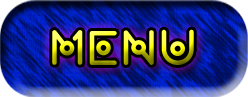
<style>
.page{position:relative;width:248px;height:97px}
.page>*{position:absolute;margin:0}
.t1{font:50px "wearealien!!"}
</style>
<div class="page">
<p class="t1" style="left:52px;top:29px;width:142px;height:36px">Menu</p>
</div>
